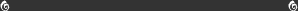
<style>
.page{position:relative;width:298px;height:11px;background:#333333}
.page>*{position:absolute;margin:0}
.t1{font:28px "Gigi-Regular";color:#ffffff}
</style>
<div class="page">
<p class="t1" style="left:0px;top:0px;width:298px;height:11px">o         o</p>
</div>
